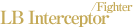
<style>
.page{position:relative;width:133px;height:27px;background:#ffffff}
.page>*{position:absolute;margin:0}
.t1{font:18px/12px "RyuminPro-ExBold";letter-spacing:-0.08em;color:#c4a956}
.t2{font:12px/11px "RyuminPro-ExBold";letter-spacing:-0.08em;color:#c4a956}
</style>
<div class="page">
<p class="t1" style="left:0px;top:2px;width:133px;height:25px">LB Interceptor<br><span class="t2">                              /Fighter</span></p>
</div>
